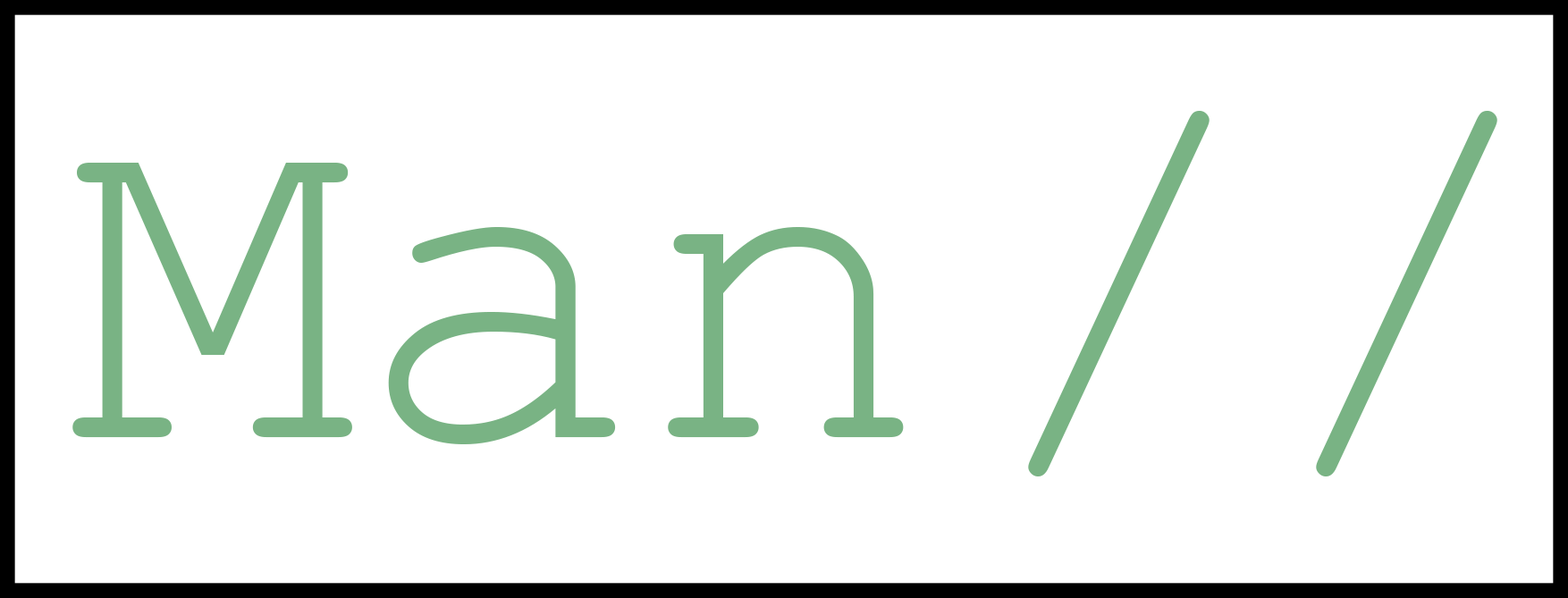
<style>
.page{position:relative;width:1568px;height:598px;background:#ffffff}
.page>*{position:absolute;margin:0}
.t1{font:479.6px "CourierNewPSMT";color:#79b384}
</style>
<div class="page">
<p class="t1" style="left:72px;top:111px;width:1425px;height:365px">Man  //</p>
</div>
